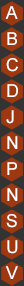
<style>
.page{position:relative;width:24px;height:286px;background:#9e3810}
.page>*{position:absolute;margin:0}
.t1{font:17.7px "ArialMT";letter-spacing:0.32em;color:#ffffff}
</style>
<div class="page">
<p class="t1" style="left:5px;top:6px;width:13px;height:13px">A</p>
<p class="t1" style="left:7px;top:32px;width:10px;height:13px">B</p>
<p class="t1" style="left:6px;top:58px;width:12px;height:14px">C</p>
<p class="t1" style="left:7px;top:84px;width:11px;height:13px">D</p>
<p class="t1" style="left:6px;top:110px;width:8px;height:14px">J</p>
<p class="t1" style="left:7px;top:136px;width:11px;height:13px">N</p>
<p class="t1" style="left:7px;top:162px;width:10px;height:13px">P</p>
<p class="t1" style="left:7px;top:188px;width:11px;height:13px">N</p>
<p class="t1" style="left:6px;top:214px;width:11px;height:14px">S</p>
<p class="t1" style="left:7px;top:240px;width:11px;height:14px">U</p>
<p class="t1" style="left:6px;top:266px;width:12px;height:13px">V</p>
</div>
